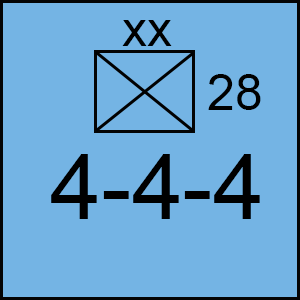
<style>
.page{position:relative;width:300px;height:300px;background:#74b4e4}
.page>*{position:absolute;margin:0}
.t1{font:50px "ArialMT";color:#000000}
.t2{font:91.7px "ArialMT";color:#000000}
</style>
<div class="page">
<p class="t1" style="left:122px;top:20px;width:50px;height:26px">xx</p>
<p class="t1" style="left:208px;top:74px;width:53px;height:36px">28</p>
<p class="t2" style="left:51px;top:154px;width:209px;height:65px">4-4-4</p>
</div>
